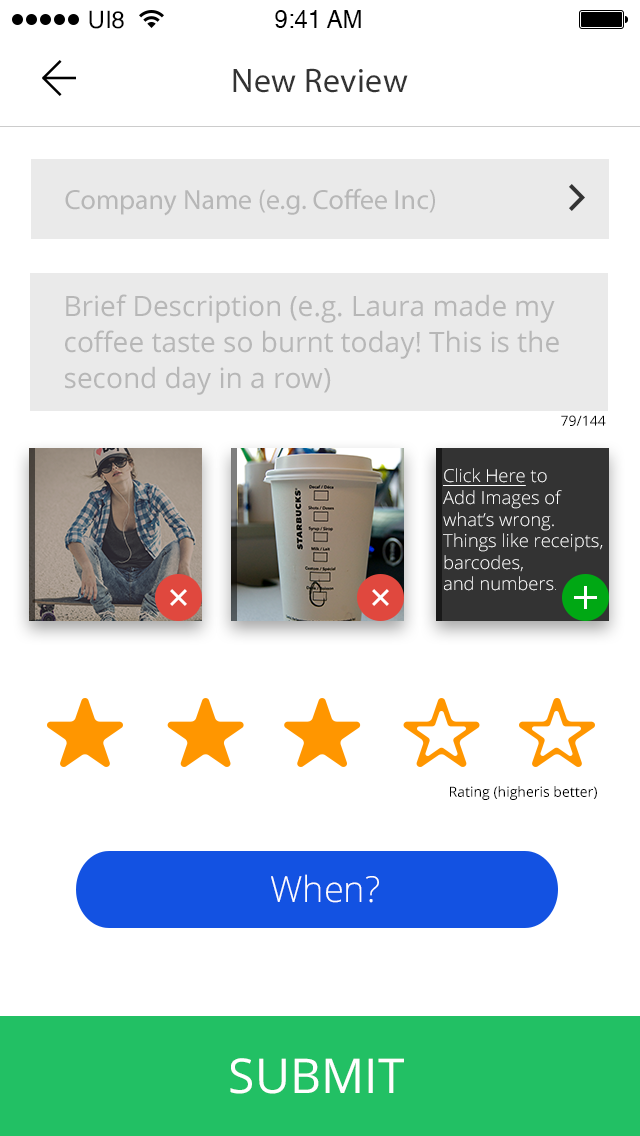
<style>
.page{position:relative;width:640px;height:1136px;background:#ffffff}
.page>*{position:absolute;margin:0}
.t1{font:24px "Helvetica";color:#000000}
.t2{font:34px "MyriadPro-Regular";letter-spacing:0.01em;color:#333333}
.t3{font:28px "MyriadPro-Regular";color:#b7b7b7}
.t4{font:28px/36px "OpenSans";color:#b7b7b7}
.t5{font:14px "OpenSans";color:#000000}
.t6{font:18px "OpenSans-Light";color:#ffffff}
.t7{font:18px "OpenSans-Light";color:#ffffff;text-decoration:underline}
.t8{font:11px "OpenSans-Light";color:#ffffff}
.t9{font:36px "OpenSans-Light";color:#fefefe}
.t10{font:48px "OpenSans";color:#fefefe}
</style>
<div class="page">
<p class="t1" style="left:89px;top:10px;width:35px;height:19px">UI8</p>
<p class="t1" style="left:275px;top:10px;width:86px;height:18px">9:41 AM</p>
<p class="t2" style="left:233px;top:68px;width:175px;height:25px">New Review</p>
<p class="t3" style="left:65px;top:188px;width:370px;height:28px">Company Name (e.g. Coffee Inc)</p>
<p class="t4" style="left:65px;top:294px;width:494px;height:101px">Brief Description (e.g. Laura made my coffee taste so burnt today! This is the second day in a row)</p>
<p class="t5" style="left:561px;top:415px;width:45px;height:11px">79/144</p>
<p class="t6" style="left:443px;top:468px;width:160px;height:123px"><span class="t7">Click Here</span> to <br>Add Images of <br>what’s wrong. <br>Things like receipts,<br>barcodes,<br>and numbers<span class="t8">.</span></p>
<p class="t5" style="left:450px;top:786px;width:147px;height:14px">Rating (higheris better)</p>
<p class="t9" style="left:271px;top:874px;width:108px;height:29px">When?</p>
<p class="t10" style="left:230px;top:1058px;width:174px;height:36px">SUBMIT</p>
</div>
